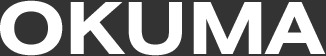
<style>
.page{position:relative;width:326px;height:56px;background:#333333}
.page>*{position:absolute;margin:0}
.t1{font:72px "Swiss721BT-BoldExtended";color:#ffffff}
</style>
<div class="page">
<p class="t1" style="left:0px;top:0px;width:326px;height:56px">OKUMA</p>
</div>
